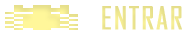
<style>
.page{position:relative;width:193px;height:35px;background:#ffffff}
.page>*{position:absolute;margin:0}
.t1{font:30px "AgencyFB-Reg";letter-spacing:0.04em;color:#fff79a;font-weight:bold}
</style>
<div class="page">
<p class="t1" style="left:102px;top:6px;width:80px;height:24px">ENTRAR</p>
</div>
